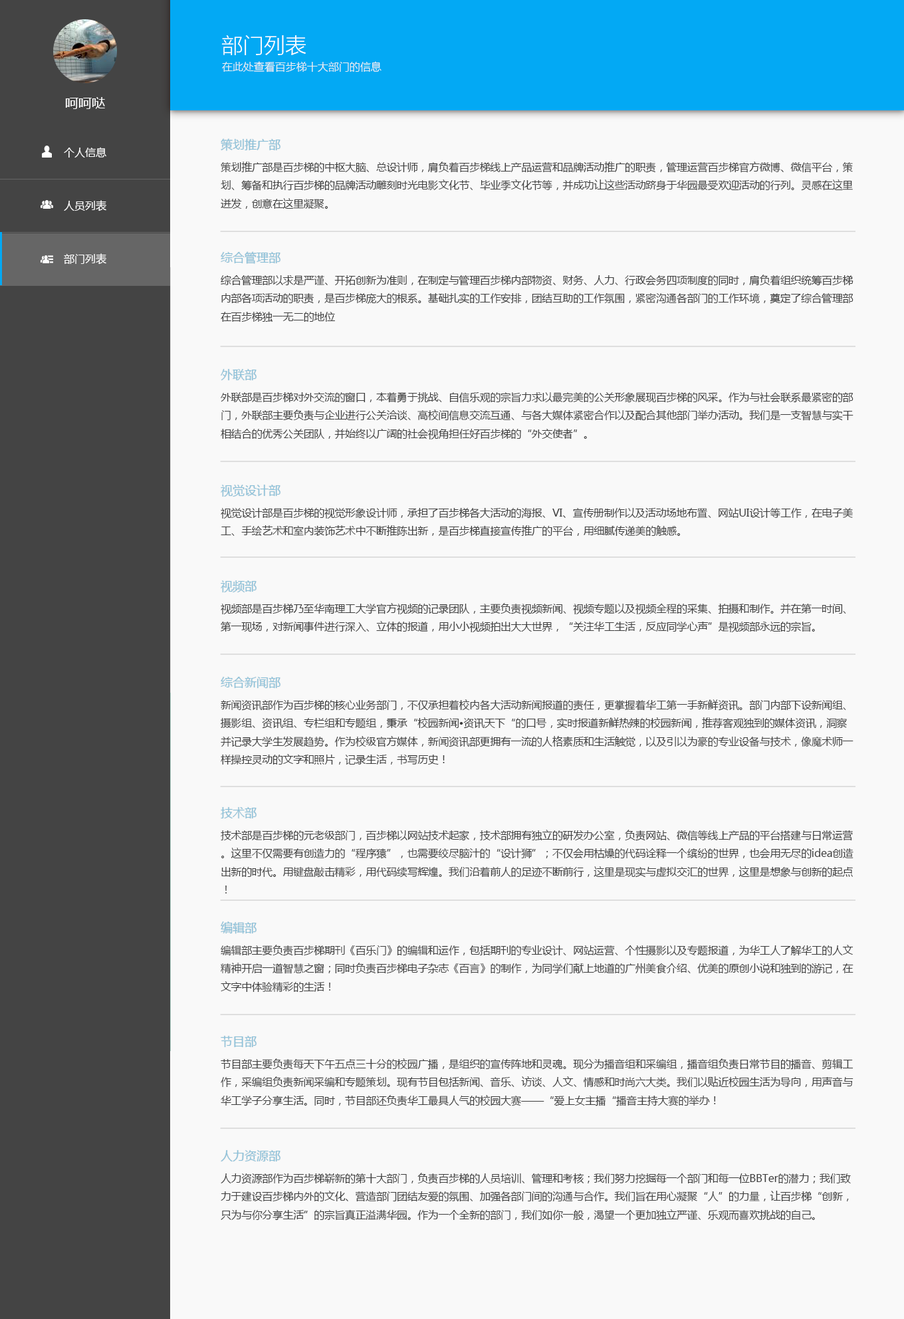
<style>
.page{position:relative;width:904px;height:1319px;background:#f9f9f9}
.page>*{position:absolute;margin:0}
.t1{font:21.3px "MicrosoftYaHeiLight";color:#ffffff}
.t2{font:10.6px "MicrosoftYaHeiLight";color:#f2f2f2}
.t3{font:13.3px "MicrosoftYaHei";color:#ffffff}
.t4{font:10.6px "MicrosoftYaHei";color:#ffffff}
.t5{font:12px "MicrosoftYaHei";color:#8ac1da}
.t6{font:10.4px "MicrosoftYaHei";color:#3e3e3e}
</style>
<div class="page">
<p class="t1" style="left:221px;top:35px;width:85px;height:20px">部门列表</p>
<p class="t2" style="left:222px;top:61px;width:160px;height:11px">在此处查看百步梯十大部门的信息</p>
<p class="t3" style="left:65px;top:97px;width:40px;height:12px">呵呵哒</p>
<p class="t4" style="left:64px;top:147px;width:42px;height:11px">个人信息</p>
<p class="t5" style="left:221px;top:138px;width:60px;height:13px">策划推广部</p>
<p class="t6" style="left:221px;top:162px;width:632px;height:47px">策划推广部是百步梯的中枢大脑、总设计师，肩负着百步梯线上产品运营和品牌活动推广的职责，管理运营百步梯官方微博、微信平台，策<br>划、筹备和执行百步梯的品牌活动雕刻时光电影文化节、毕业季文化节等，并成功让这些活动跻身于华园最受欢迎活动的行列。灵感在这里<br>迸发，创意在这里凝聚。</p>
<p class="t4" style="left:64px;top:200px;width:42px;height:11px">人员列表</p>
<p class="t4" style="left:64px;top:253px;width:42px;height:12px">部门列表</p>
<p class="t5" style="left:221px;top:251px;width:60px;height:13px">综合管理部</p>
<p class="t6" style="left:221px;top:275px;width:633px;height:47px">综合管理部以求是严谨、开拓创新为准则，在制定与管理百步梯内部物资、财务、人力、行政会务四项制度的同时，肩负着组织统筹百步梯<br>内部各项活动的职责，是百步梯庞大的根系。基础扎实的工作安排，团结互助的工作氛围，紧密沟通各部门的工作环境，奠定了综合管理部<br>在百步梯独一无二的地位</p>
<p class="t5" style="left:221px;top:369px;width:36px;height:11px">外联部</p>
<p class="t6" style="left:221px;top:392px;width:633px;height:47px">外联部是百步梯对外交流的窗口，本着勇于挑战、自信乐观的宗旨力求以最完美的公关形象展现百步梯的风采。作为与社会联系最紧密的部<br>门，外联部主要负责与企业进行公关洽谈、高校间信息交流互通、与各大媒体紧密合作以及配合其他部门举办活动。我们是一支智慧与实干<br>相结合的优秀公关团队，并始终以广阔的社会视角担任好百步梯的“外交使者”。</p>
<p class="t5" style="left:221px;top:485px;width:60px;height:12px">视觉设计部</p>
<p class="t6" style="left:221px;top:507px;width:632px;height:29px">视觉设计部是百步梯的视觉形象设计师，承担了百步梯各大活动的海报、VI、宣传册制作以及活动场地布置、网站UI设计等工作，在电子美<br>工、手绘艺术和室内装饰艺术中不断推陈出新，是百步梯直接宣传推广的平台，用细腻传递美的触感。</p>
<p class="t5" style="left:221px;top:580px;width:36px;height:12px">视频部</p>
<p class="t6" style="left:221px;top:603px;width:625px;height:29px">视频部是百步梯乃至华南理工大学官方视频的记录团队，主要负责视频新闻、视频专题以及视频全程的采集、拍摄和制作。并在第一时间、<br>第一现场，对新闻事件进行深入、立体的报道，用小小视频拍出大大世界，“关注华工生活，反应同学心声”是视频部永远的宗旨。</p>
<p class="t5" style="left:221px;top:677px;width:60px;height:11px">综合新闻部</p>
<p class="t6" style="left:220px;top:699px;width:634px;height:66px">新闻资讯部作为百步梯的核心业务部门，不仅承担着校内各大活动新闻报道的责任，更掌握着华工第一手新鲜资讯。部门内部下设新闻组、<br>摄影组、资讯组、专栏组和专题组，秉承“校园新闻•资讯天下“的口号，实时报道新鲜热辣的校园新闻，推荐客观独到的媒体资讯，洞察<br>并记录大学生发展趋势。作为校级官方媒体，新闻资讯部更拥有一流的人格素质和生活触觉，以及引以为豪的专业设备与技术，像魔术师一<br>样操控灵动的文字和照片，记录生活，书写历史！</p>
<p class="t5" style="left:221px;top:807px;width:36px;height:11px">技术部</p>
<p class="t6" style="left:221px;top:830px;width:633px;height:63px">技术部是百步梯的元老级部门，百步梯以网站技术起家，技术部拥有独立的研发办公室，负责网站、微信等线上产品的平台搭建与日常运营<br>。这里不仅需要有创造力的“程序猿”，也需要绞尽脑汁的“设计狮”；不仅会用枯燥的代码诠释一个缤纷的世界，也会用无尽的idea创造<br>出新的时代。用键盘敲击精彩，用代码续写辉煌。我们沿着前人的足迹不断前行，这里是现实与虚拟交汇的世界，这里是想象与创新的起点<br>！</p>
<p class="t5" style="left:221px;top:921px;width:36px;height:13px">编辑部</p>
<p class="t6" style="left:221px;top:945px;width:633px;height:47px">编辑部主要负责百步梯期刊《百乐门》的编辑和运作，包括期刊的专业设计、网站运营、个性摄影以及专题报道，为华工人了解华工的人文<br>精神开启一道智慧之窗；同时负责百步梯电子杂志《百言》的制作，为同学们献上地道的广州美食介绍、优美的原创小说和独到的游记，在<br>文字中体验精彩的生活！</p>
<p class="t5" style="left:221px;top:1036px;width:36px;height:11px">节目部</p>
<p class="t6" style="left:221px;top:1058px;width:633px;height:48px">节目部主要负责每天下午五点三十分的校园广播，是组织的宣传阵地和灵魂。现分为播音组和采编组，播音组负责日常节目的播音、剪辑工<br>作，采编组负责新闻采编和专题策划。现有节目包括新闻、音乐、访谈、人文、情感和时尚六大类。我们以贴近校园生活为导向，用声音与<br>华工学子分享生活。同时，节目部还负责华工最具人气的校园大赛——“爱上女主播“播音主持大赛的举办！</p>
<p class="t5" style="left:221px;top:1150px;width:60px;height:11px">人力资源部</p>
<p class="t6" style="left:221px;top:1173px;width:630px;height:48px">人力资源部作为百步梯崭新的第十大部门，负责百步梯的人员培训、管理和考核；我们努力挖掘每一个部门和每一位BBTer的潜力；我们致<br>力于建设百步梯内外的文化、营造部门团结友爱的氛围、加强各部门间的沟通与合作。我们旨在用心凝聚“人”的力量，让百步梯“创新，<br>只为与你分享生活”的宗旨真正溢满华园。作为一个全新的部门，我们如你一般，渴望一个更加独立严谨、乐观而喜欢挑战的自己。</p>
</div>
